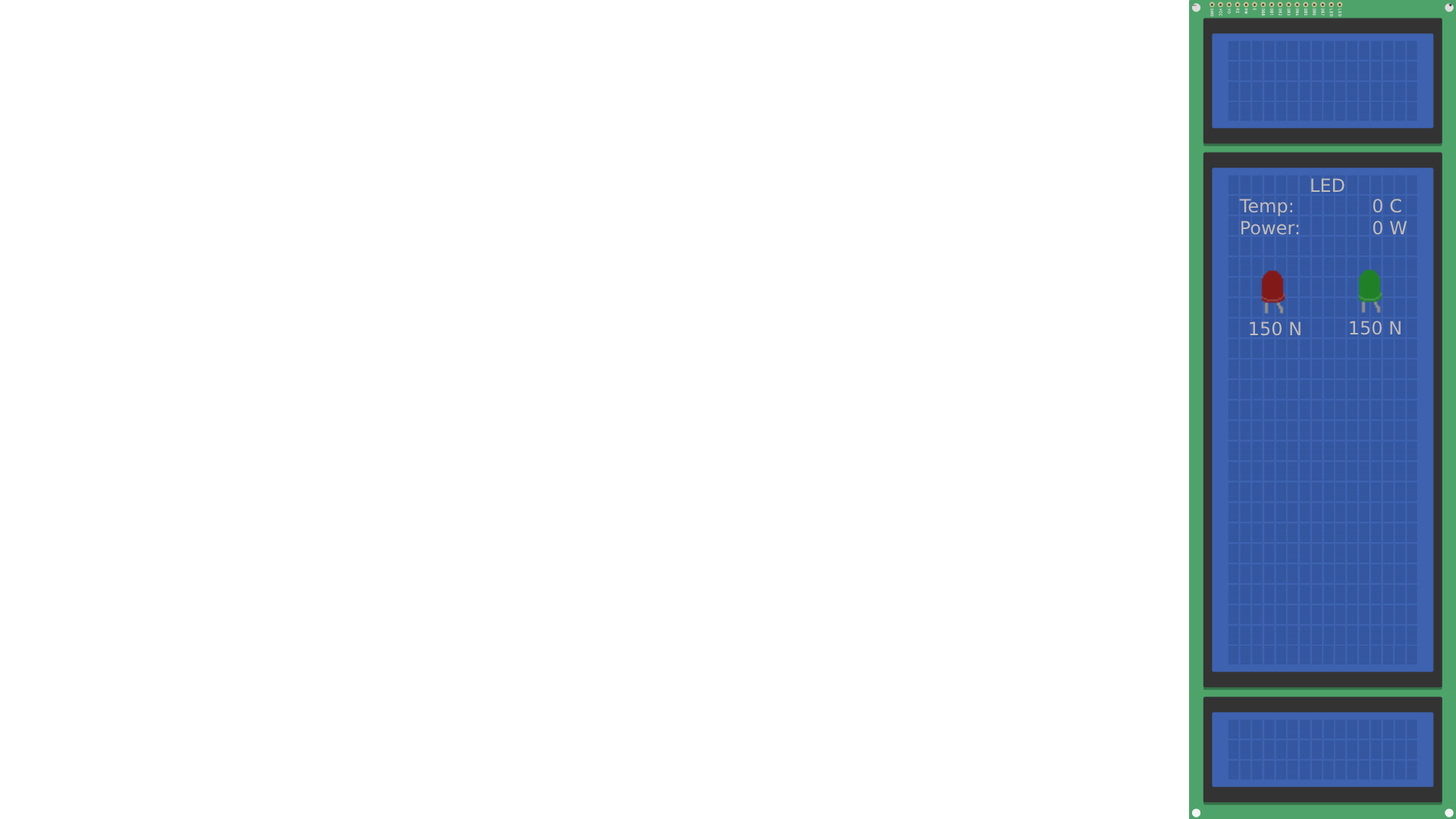
<style>
.page{position:relative;width:1456px;height:819px;background:#ffffff}
.page>*{position:absolute;margin:0}
.t1{font:18.2px "DejaVuSans";color:#c1bcbb}
.t2{font:18.2px "DejaVuSans";color:#c5c6c6}
</style>
<div class="page">
<p class="t1" style="left:1311px;top:178px;width:34px;height:14px"><span class="t2">L</span>ED</p>
<p class="t1" style="left:1239px;top:199px;width:168px;height:36px">Temp:       0 C<br>Power:       0 W</p>
<p class="t1" style="left:1250px;top:322px;width:51px;height:14px">150 N</p>
<p class="t1" style="left:1350px;top:321px;width:51px;height:14px">150 N</p>
</div>
